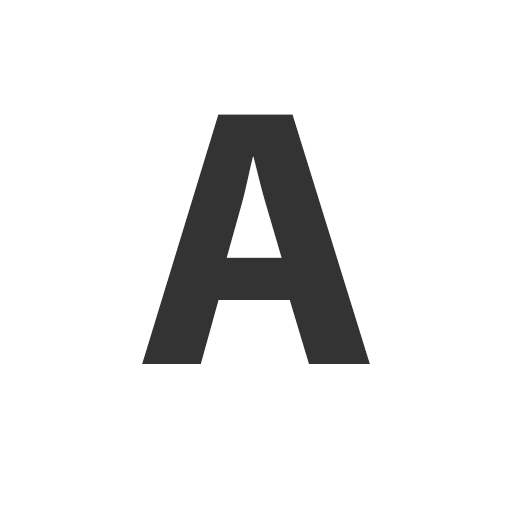
<style>
.page{position:relative;width:512px;height:512px;background:#ffffff}
.page>*{position:absolute;margin:0}
.t1{font:370px "MyriadPro-Bold";color:#333333}
</style>
<div class="page">
<p class="t1" style="left:142px;top:114px;width:228px;height:250px">A</p>
</div>
